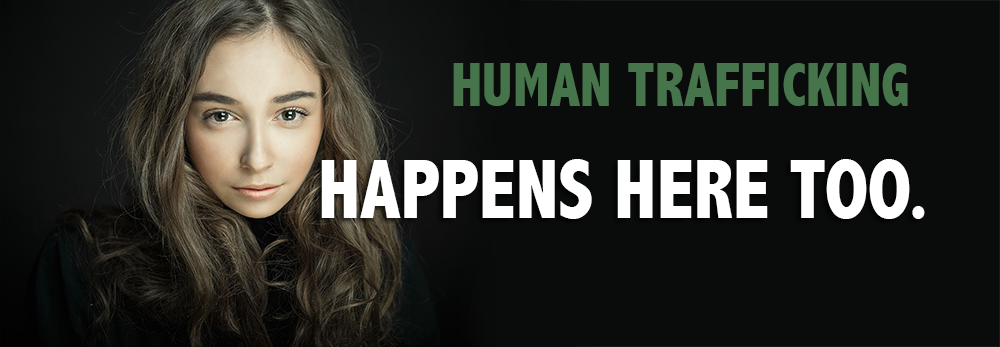
<style>
.page{position:relative;width:1000px;height:347px;background:#0a0c0b}
.page>*{position:absolute;margin:0}
.t1{font:63.3px "AbadiMT-CondensedExtraBold";color:#46744b;scale:0.92 1}
.t2{font:85.2px "AbadiMT-CondensedExtraBold";color:#ffffff;scale:0.92 1}
</style>
<div class="page">
<p class="t1" style="left:453px;top:63px;width:455px;height:43px">HUMAN TRAFFICKING</p>
<p class="t2" style="left:321px;top:159px;width:604px;height:60px">HAPPENS HERE TOO.</p>
</div>
